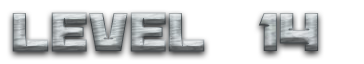
<style>
.page{position:relative;width:364px;height:64px;background:#ffffff}
.page>*{position:absolute;margin:0}
.t1{font:60px "BananaBrick"}
</style>
<div class="page">
<p class="t1" style="left:12px;top:12px;width:307px;height:40px">Level  14</p>
</div>
